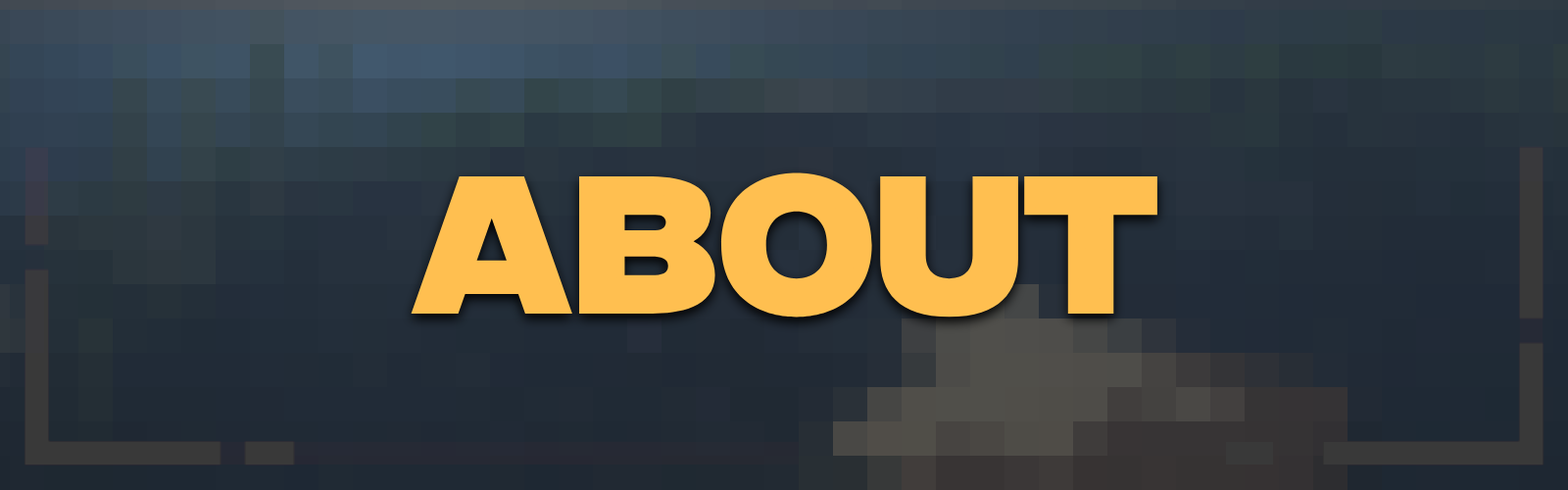
<style>
.page{position:relative;width:1568px;height:490px}
.page>*{position:absolute;margin:0}
.t1{font:196px "MilkerRegular";color:#ffbf50}
</style>
<div class="page">
<p class="t1" style="left:411px;top:172px;width:746px;height:146px">ABOUT</p>
</div>
